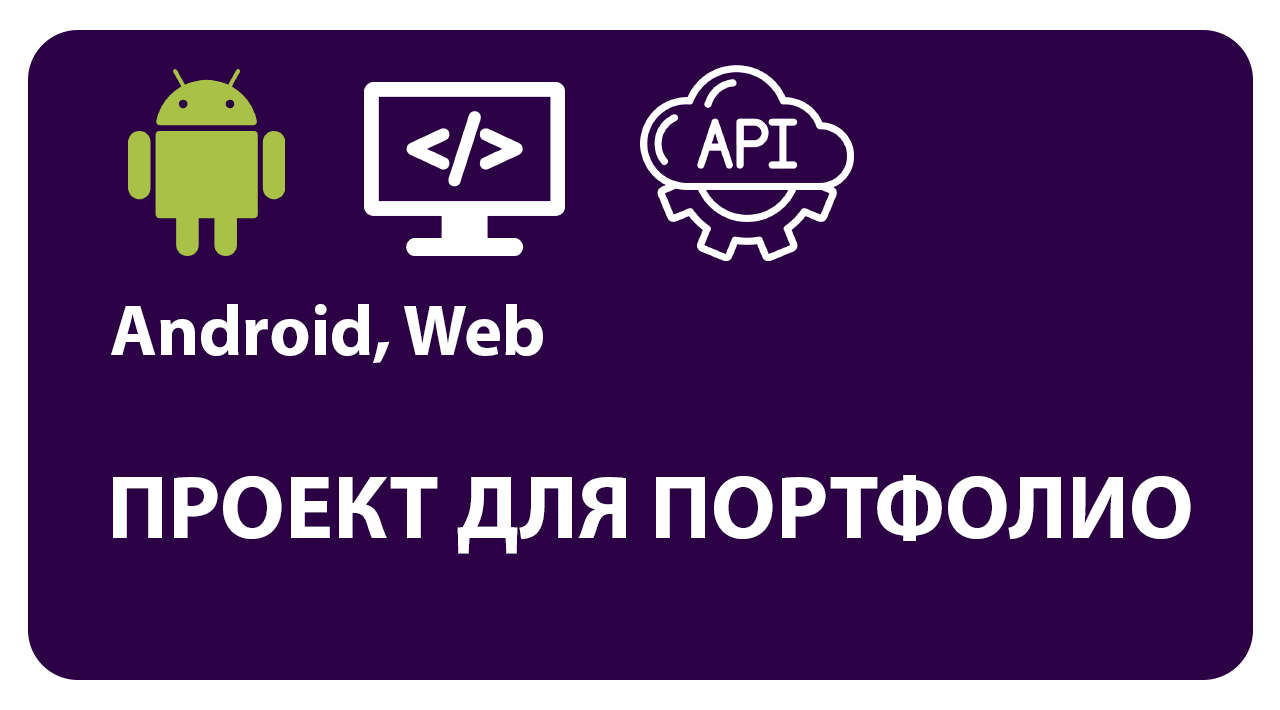
<style>
.page{position:relative;width:1280px;height:710px;background:#2b0044}
.page>*{position:absolute;margin:0}
.t1{font:72px "MyriadPro-Bold";color:#ffffff}
.t2{font:90px "MyriadPro-Bold";color:#ffffff}
</style>
<div class="page">
<p class="t1" style="left:111px;top:304px;width:432px;height:59px">Android, Web</p>
<p class="t2" style="left:113px;top:475px;width:1078px;height:79px">ПРОЕКТ ДЛЯ ПОРТФОЛИО</p>
</div>
